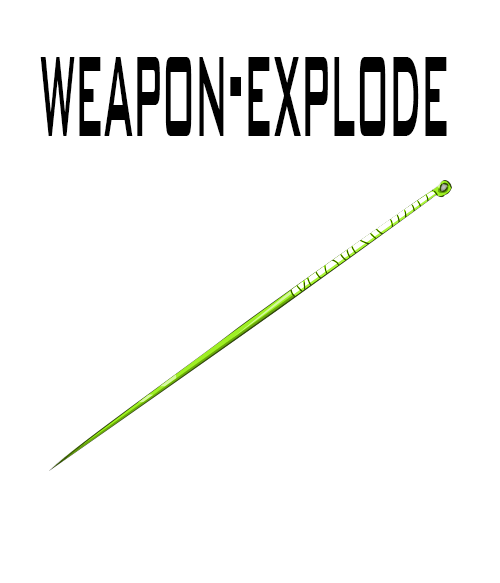
<style>
.page{position:relative;width:500px;height:583px;background:#ffffff}
.page>*{position:absolute;margin:0}
.t1{font:186.2px "BankGothicBT-Medium";color:#000000;scale:0.25 1}
</style>
<div class="page">
<p class="t1" style="left:40px;top:57px;width:407px;height:79px">weapon-explode</p>
</div>
